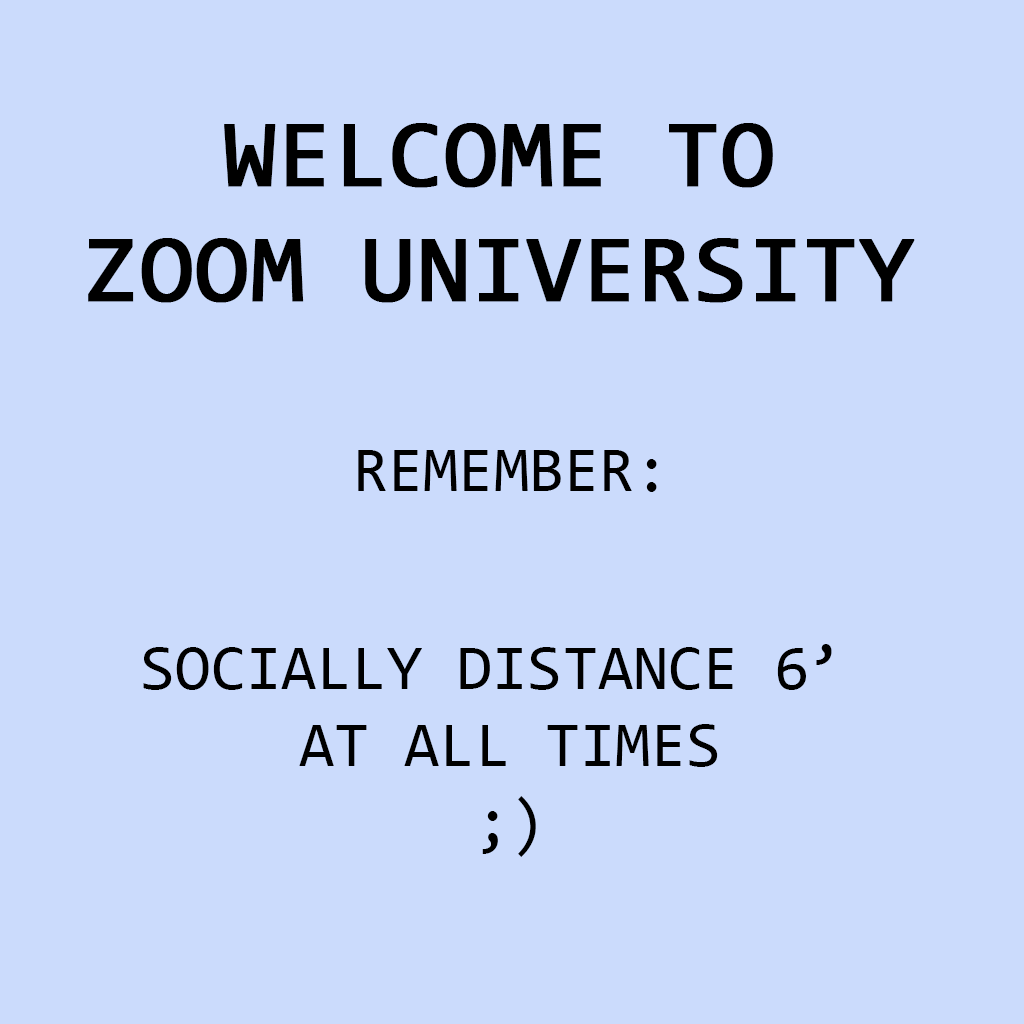
<style>
.page{position:relative;width:1024px;height:1024px;background:#cbdbfc}
.page>*{position:absolute;margin:0}
.t1{font:96px "Consolas";color:#000000;font-weight:bold}
.t2{font:64px "Consolas";color:#000000}
</style>
<div class="page">
<p class="t1" style="left:88px;top:123px;width:827px;height:180px;text-align:center">WELCOME TO<br>ZOOM UNIVERSITY</p>
<p class="t2" style="left:358px;top:450px;width:299px;height:42px">REMEMBER:</p>
<p class="t2" style="left:143px;top:644px;width:689px;height:213px;text-align:center">SOCIALLY DISTANCE 6’ <br>AT ALL TIMES<br>;)</p>
</div>
